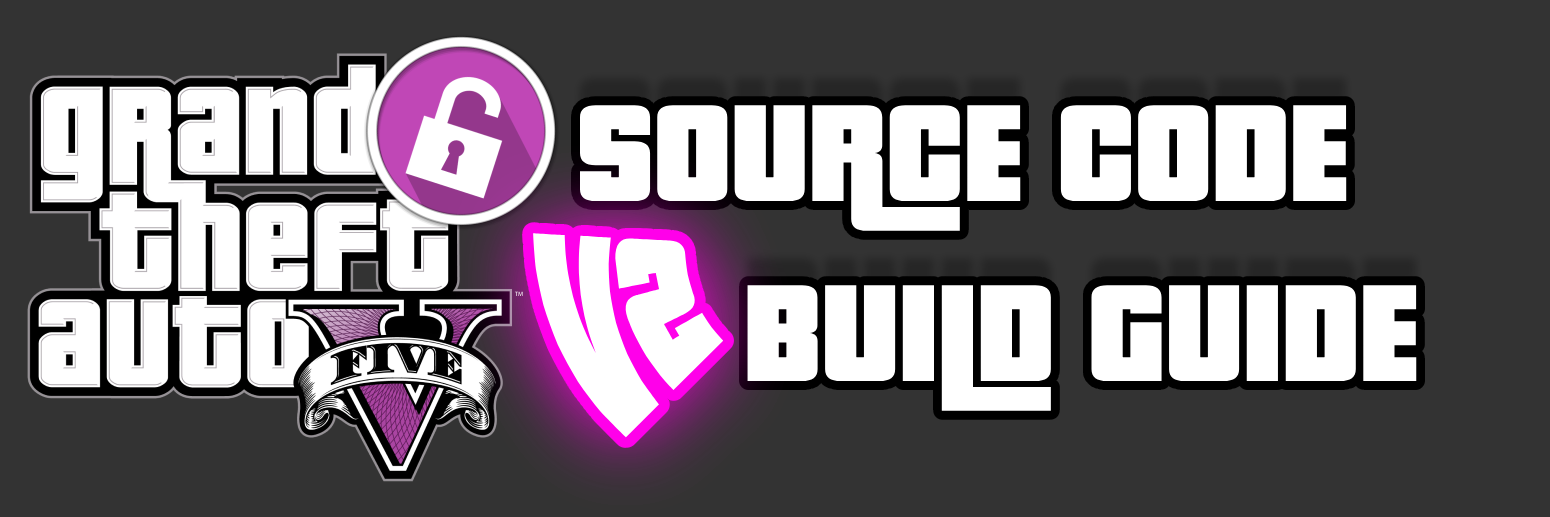
<style>
.page{position:relative;width:1550px;height:517px;background:#333333}
.page>*{position:absolute;margin:0}
.t1{font:150px "PricedownBl-Regular";color:#ffffff}
</style>
<div class="page">
<p class="t1" style="left:580px;top:105px;width:837px;height:306px">SOURCE CODE <br>     BUILD GUIDE</p>
<p class="t1" style="left:533px;top:233px;width:191px;height:205px">V2</p>
</div>
